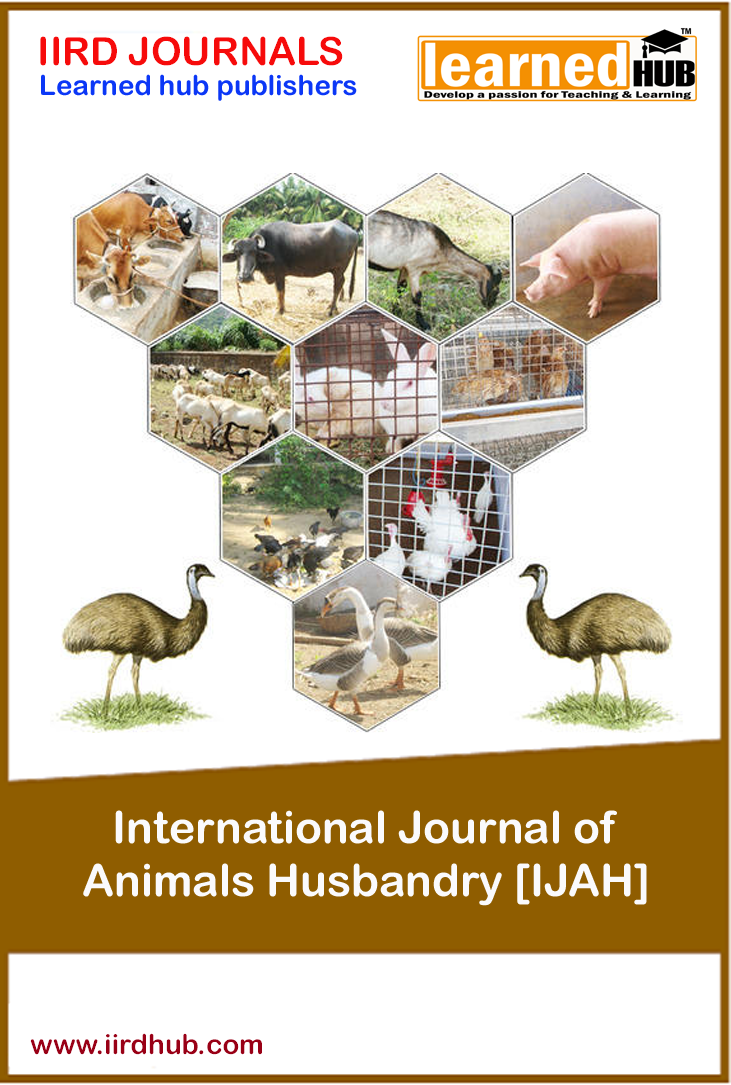
<style>
.page{position:relative;width:731px;height:1085px;background:#ffffff}
.page>*{position:absolute;margin:0}
.t1{font:38.9px "ArialRoundedMTBold";color:#f60b0b}
.t2{font:27.8px "ArialRoundedMTBold";color:#0b37f6}
.t3{font:44.4px "ArialRoundedMTBold";color:#fafafc}
.t4{font:27.8px "ArialRoundedMTBold";color:#990016}
</style>
<div class="page">
<p class="t1" style="left:40px;top:36px;width:303px;height:30px">IIRD JOURNALS</p>
<p class="t2" style="left:41px;top:74px;width:316px;height:27px">Learned hub publishers</p>
<p class="t3" style="left:83px;top:810px;width:564px;height:96px;text-align:center">International Journal of <br>Animals Husbandry [IJAH]</p>
<p class="t4" style="left:30px;top:1033px;width:232px;height:22px">www.iirdhub.com</p>
</div>
